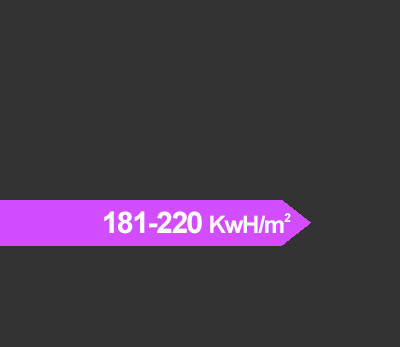
<style>
.page{position:relative;width:400px;height:347px;background:#333333}
.page>*{position:absolute;margin:0}
.t1{font:30px "Arial-BoldMT";letter-spacing:-0.05em;color:#ffffff}
.t2{font:24px "Arial-BoldMT";letter-spacing:-0.05em;color:#ffffff}
.t3{font:12px "Arial-BoldMT";letter-spacing:-0.05em;color:#ffffff}
</style>
<div class="page">
<p class="t1" style="left:104px;top:211px;width:187px;height:23px">181-220 <span class="t2">KwH/m</span><span class="t3">2</span></p>
</div>
